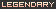
<style>
.page{position:relative;width:56px;height:9px;background:#333333}
.page>*{position:absolute;margin:0}
.t1{font:8px "5x5-Pixel"}
</style>
<div class="page">
<p class="t1" style="left:2px;top:2px;width:52px;height:5px">legendary</p>
</div>
